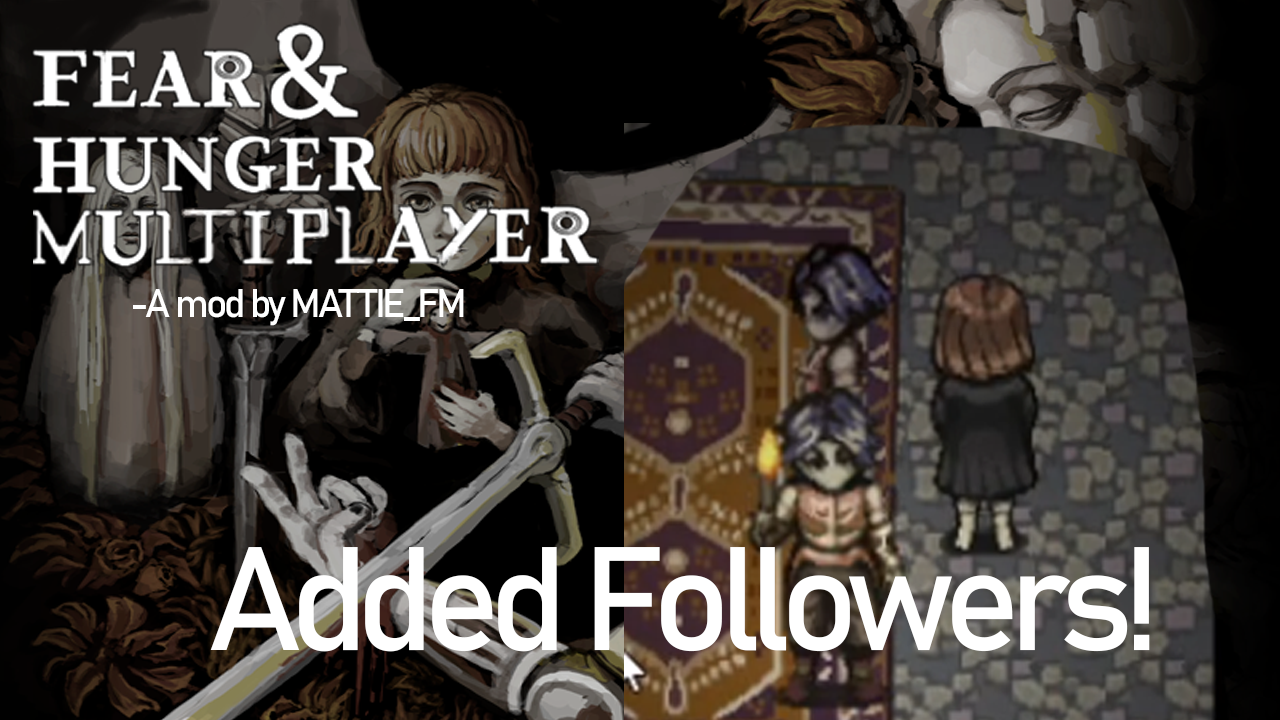
<style>
.page{position:relative;width:1280px;height:720px}
.page>*{position:absolute;margin:0}
.t1{font:39.4px "Bahnschrift";letter-spacing:-0.08em;color:#ffffff}
.t2{font:144.6px "Bahnschrift";letter-spacing:-0.08em;color:#ffffff}
</style>
<div class="page">
<p class="t1" style="left:133px;top:289px;width:331px;height:37px">-A mod by MATTIE_FM</p>
<p class="t2" style="left:210px;top:547px;width:940px;height:105px">Added Followers!</p>
</div>
